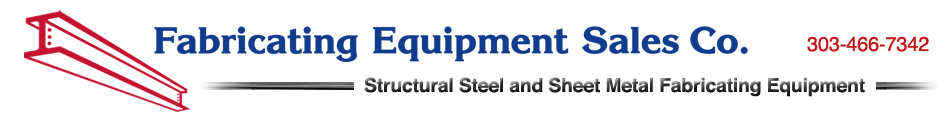
<style>
.page{position:relative;width:950px;height:120px;background:#ffffff}
.page>*{position:absolute;margin:0}
.t1{font:20px "Helvetica";letter-spacing:-0.01em;color:#c41212}
.t2{font:19.4px "Helvetica-Bold";letter-spacing:-0.01em}
</style>
<div class="page">
<p class="t1" style="left:807px;top:36px;width:122px;height:16px">303-466-7342</p>
<p class="t2" style="left:364px;top:77px;width:501px;height:20px">Structural Steel and Sheet Metal Fabricating Equipment</p>
</div>
